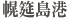
<style>
.page{position:relative;width:70px;height:18px;background:#ffffff}
.page>*{position:absolute;margin:0}
.t1{font:18px "RyuminPro-ExBold";color:#4c4843;scale:0.9 1}
</style>
<div class="page">
<p class="t1" style="left:3px;top:0px;width:64px;height:18px">幌筵島港</p>
</div>
